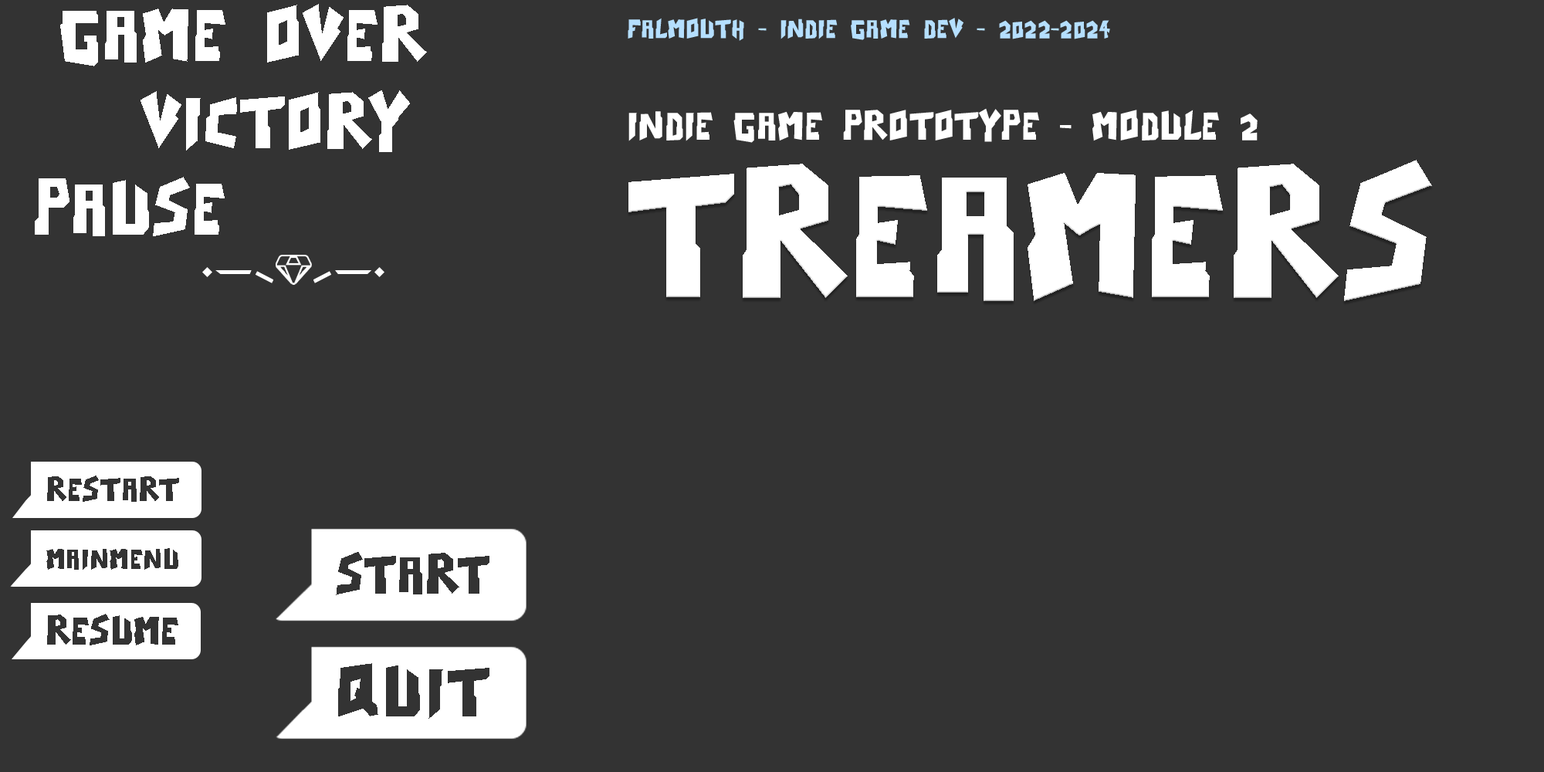
<style>
.page{position:relative;width:1544px;height:772px;background:#333333}
.page>*{position:absolute;margin:0}
.t1{font:104.2px "NineTsukiRegular";color:#ffffff}
.t2{font:37.1px "NineTsukiRegular";color:#b5dfff}
.t3{font:55.6px "NineTsukiRegular";color:#ffffff}
.t4{font:247.1px "NineTsukiRegular";color:#ffffff}
</style>
<div class="page">
<p class="t1" style="left:60px;top:4px;width:367px;height:62px">game over</p>
<p class="t2" style="left:628px;top:18px;width:482px;height:23px">FALMOUTH - INDIE GAME DEV - 2022-2024</p>
<p class="t1" style="left:141px;top:90px;width:269px;height:62px">victory</p>
<p class="t3" style="left:629px;top:108px;width:629px;height:35px">INDIE GAME PROTOTYPE - Module 2</p>
<p class="t4" style="left:629px;top:160px;width:803px;height:141px">treamers</p>
<p class="t1" style="left:35px;top:177px;width:190px;height:59px">pause</p>
</div>
